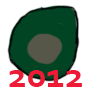
<style>
.page{position:relative;width:100px;height:100px;background:#ffffff}
.page>*{position:absolute;margin:0}
.t1{font:37.3px "Corbel-Bold";color:#ed1b35}
</style>
<div class="page">
<p class="t1" style="left:9px;top:70px;width:73px;height:17px">2012</p>
</div>
